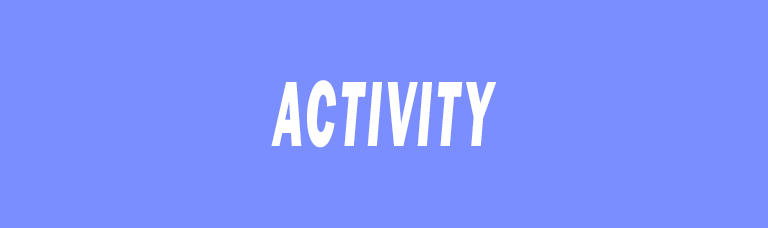
<style>
.page{position:relative;width:768px;height:228px;background:#7b8eff}
.page>*{position:absolute;margin:0}
.t1{font:96px "FranklinGothic-HeavyItalic";letter-spacing:0.07em;color:#ffffff;scale:0.5 1}
</style>
<div class="page">
<p class="t1" style="left:271px;top:80px;width:226px;height:68px">ACTIVITY</p>
</div>
